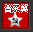
<style>
.page{position:relative;width:33px;height:32px;background:#c50000}
.page>*{position:absolute;margin:0}
.t1{font:10.4px "SimSun";letter-spacing:-0.25em;color:#ffffff}
</style>
<div class="page">
<p class="t1" style="left:4px;top:4px;width:24px;height:9px">晋察冀</p>
</div>
